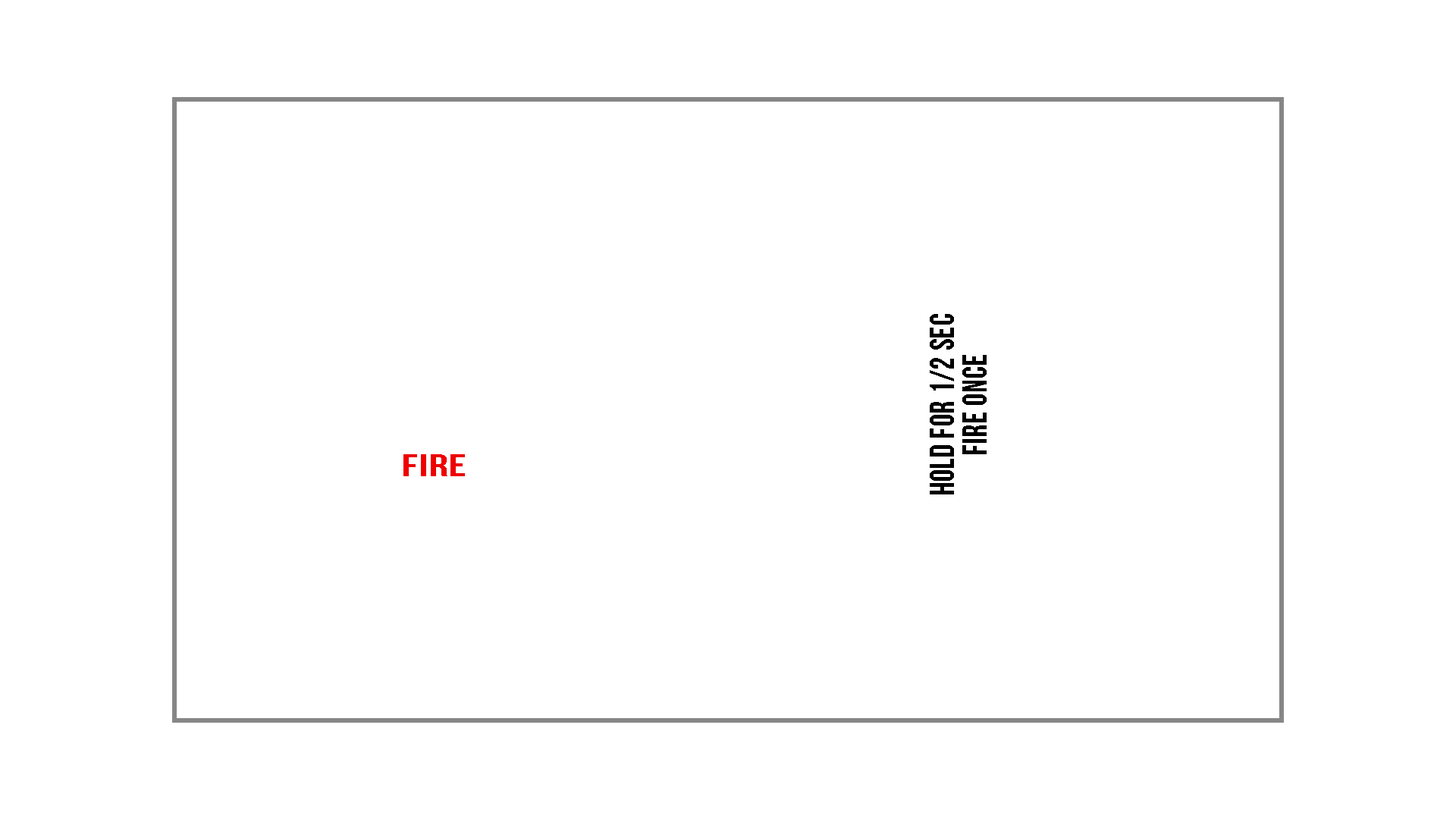
<style>
.page{position:relative;width:1456px;height:819px;background:#ffffff}
.page>*{position:absolute;margin:0}
.t1{font:34.2px/10.9px "BebasNeue";letter-spacing:0.025em;color:#000000;scale:0.91 1}
.t2{font:31.1px "BebasNeue";letter-spacing:0.025em;color:#ee0000;scale:1.51 1}
</style>
<div class="page">
<p class="t1" style="left:930px;top:314px;width:57px;height:180px;text-align:center;rotate:-90deg">Hold for 1/2 Sec<br><br><br>Fire Once</p>
<p class="t2" style="left:403px;top:454px;width:62px;height:22px">Fire</p>
</div>
